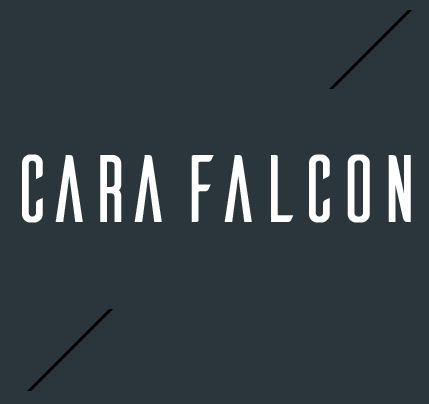
<style>
.page{position:relative;width:429px;height:404px;background:#2a363b}
.page>*{position:absolute;margin:0}
.t1{font:98px "Ailerons";letter-spacing:-0.06em;color:#ffffff}
</style>
<div class="page">
<p class="t1" style="left:22px;top:154px;width:389px;height:69px">cara falcon</p>
</div>
